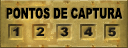
<style>
.page{position:relative;width:128px;height:48px}
.page>*{position:absolute;margin:0}
.t1{font:14.7px "Arial-Black";color:#000000;text-transform:uppercase;scale:0.65 1}
</style>
<div class="page">
<p class="t1" style="left:6px;top:7px;width:117px;height:12px">pontos de captura</p>
</div>
